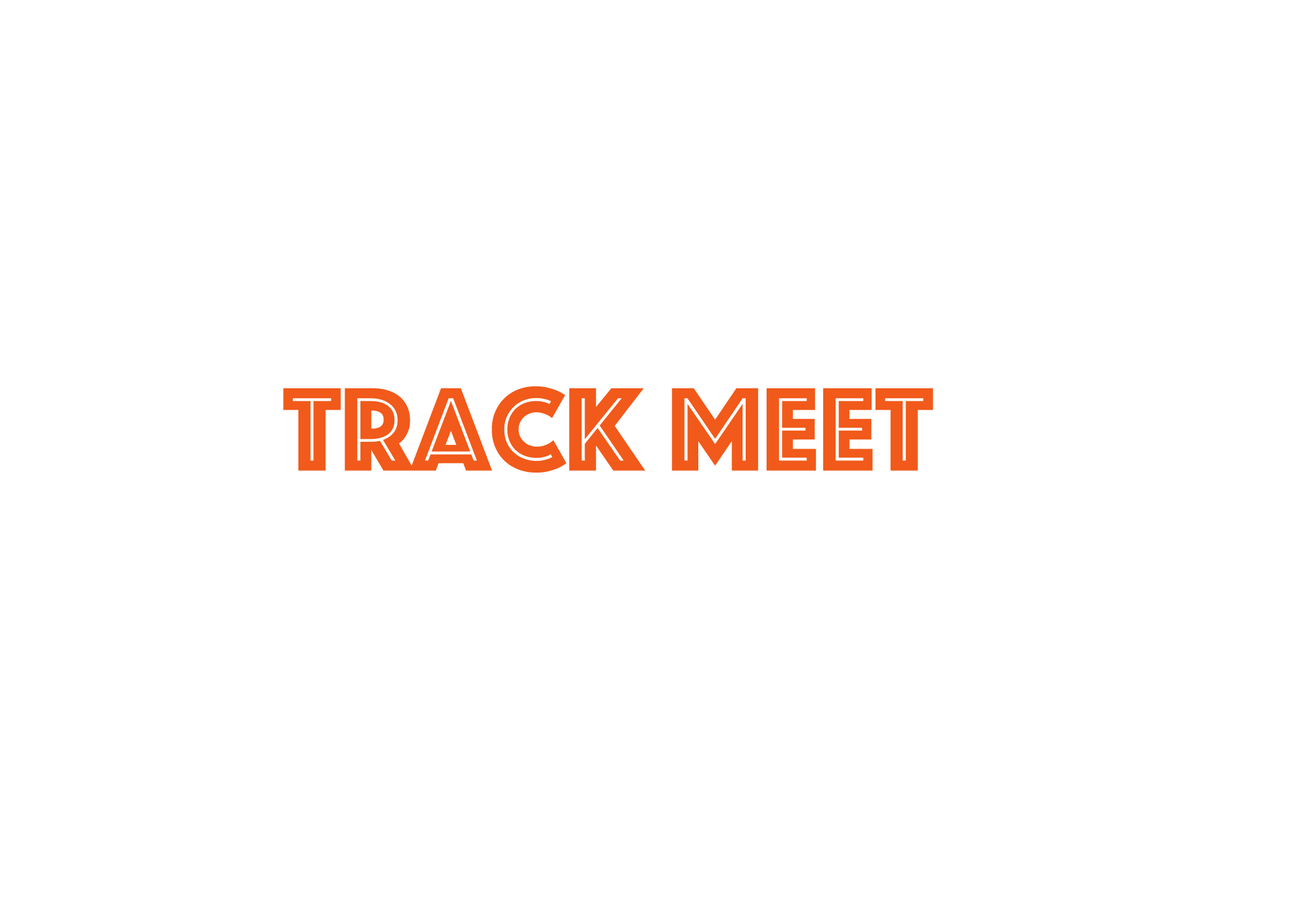
<style>
.page{position:relative;width:1292px;height:923px;background:#ffffff}
.page>*{position:absolute;margin:0}
.t1{font:123.1px "Phosphate-Inline";color:#f15a1a}
</style>
<div class="page">
<p class="t1" style="left:283px;top:386px;width:650px;height:87px">Track Meet</p>
</div>
